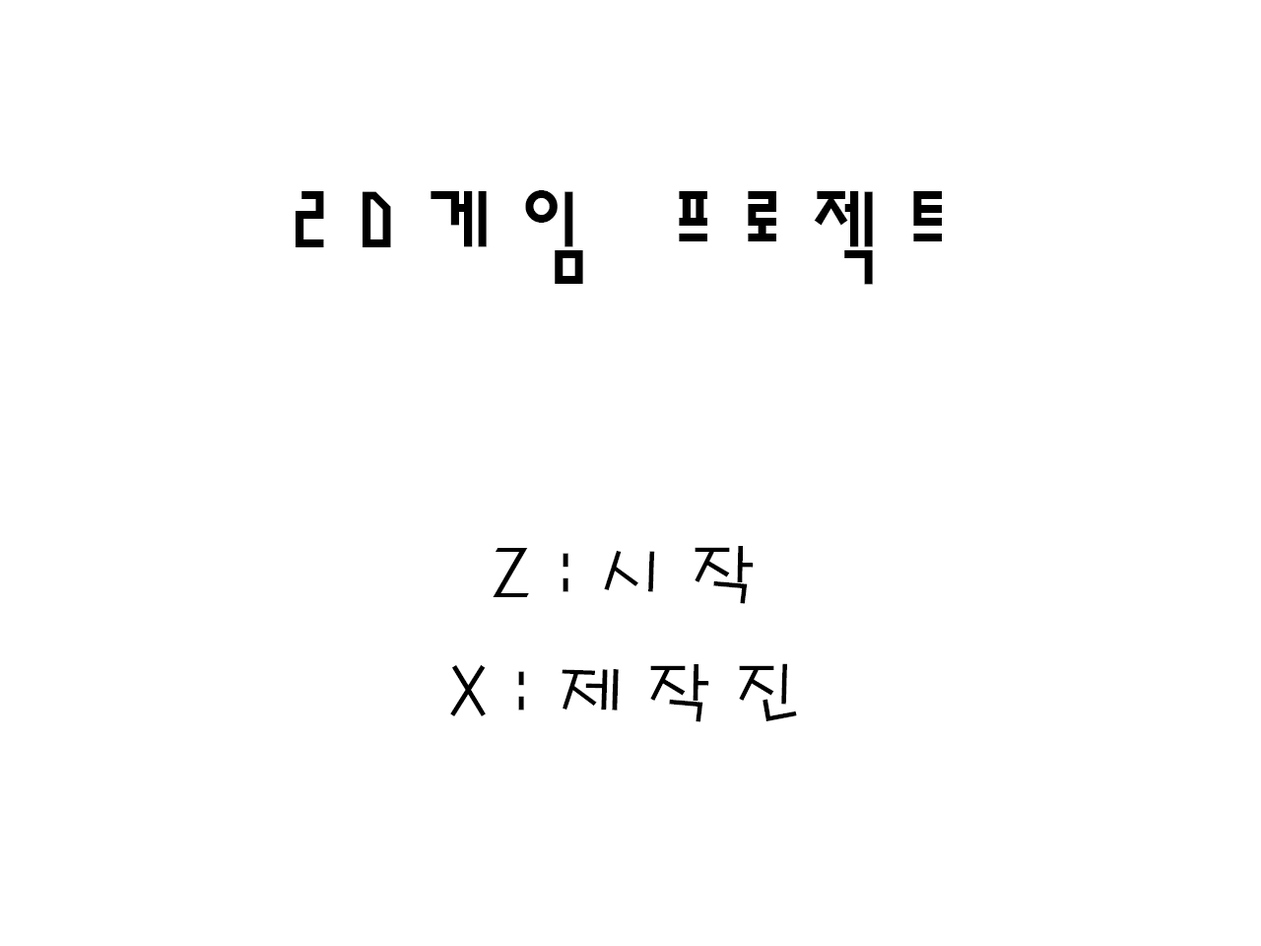
<style>
.page{position:relative;width:1261px;height:946px;background:#ffffff}
.page>*{position:absolute;margin:0}
.t1{font:98.5px "H2sa1M";letter-spacing:0.29em;color:#000000}
.t2{font:69px "H2porL";letter-spacing:0.29em;color:#000000}
</style>
<div class="page">
<p class="t1" style="left:296px;top:190px;width:646px;height:95px">2D게임 프로젝트</p>
<p class="t2" style="left:493px;top:546px;width:261px;height:58px">Z:시작</p>
<p class="t2" style="left:450px;top:663px;width:347px;height:59px">X:제작진</p>
</div>
